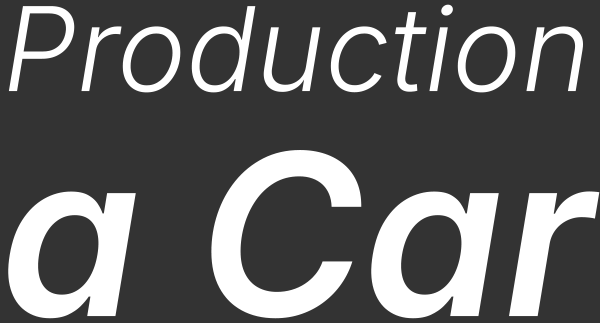
<style>
.page{position:relative;width:600px;height:323px;background:#333333}
.page>*{position:absolute;margin:0}
.t1{font:116.7px/225px "InterItalic-LightItalic";color:#ffffff}
.t2{font:225.1px/225px "InterItalic-SemiBoldItalic";color:#ffffff}
</style>
<div class="page">
<p class="t1" style="left:8px;top:4px;width:592px;height:315px;text-align:center">Production<br><span class="t2">a Car</span></p>
</div>
